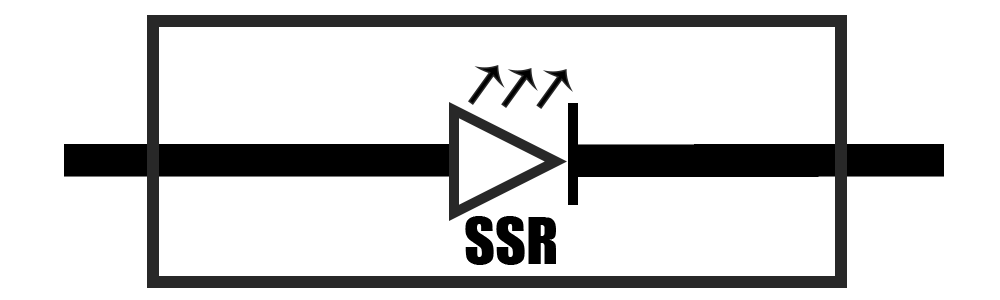
<style>
.page{position:relative;width:1000px;height:300px;background:#ffffff}
.page>*{position:absolute;margin:0}
.t1{font:60px "Impact";color:#000000}
</style>
<div class="page">
<p class="t1" style="left:465px;top:216px;width:91px;height:49px">SSR</p>
</div>
